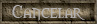
<style>
.page{position:relative;width:97px;height:24px}
.page>*{position:absolute;margin:0}
.t1{font:17.1px "Morpheus";color:#b3b0b0}
</style>
<div class="page">
<p class="t1" style="left:12px;top:5px;width:73px;height:16px">Cancelar</p>
</div>
